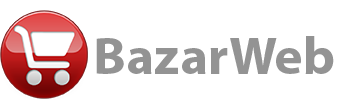
<style>
.page{position:relative;width:340px;height:110px;background:#ffffff}
.page>*{position:absolute;margin:0}
.t1{font:52.4px "MyriadPro-Bold";color:#939393}
</style>
<div class="page">
<p class="t1" style="left:96px;top:36px;width:238px;height:38px">BazarWeb</p>
</div>
